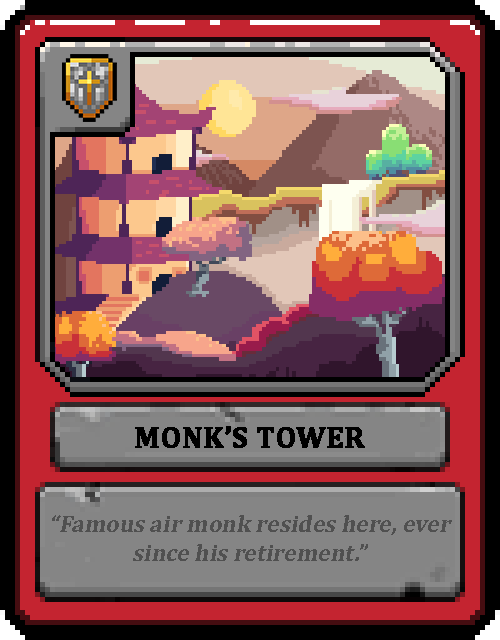
<style>
.page{position:relative;width:500px;height:640px}
.page>*{position:absolute;margin:0}
.t1{font:30px "Cambria-Bold";color:#000000;text-transform:uppercase;font-weight:bold}
.t2{font:24px "Cambria-Bold";color:#505050;font-style:italic}
</style>
<div class="page">
<p class="t1" style="left:135px;top:426px;width:230px;height:22px">Monk’s Tower</p>
<p class="t2" style="left:52px;top:515px;width:400px;height:46px;text-align:center">“Famous air monk resides here, ever since his retirement.”</p>
</div>
